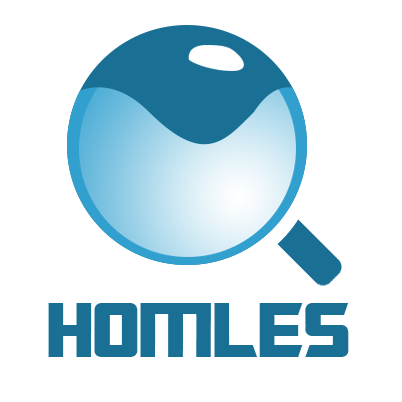
<style>
.page{position:relative;width:402px;height:402px;background:#ffffff}
.page>*{position:absolute;margin:0}
.t1{font:86.1px "TransformersMovie";color:#1a7094}
</style>
<div class="page">
<p class="t1" style="left:48px;top:303px;width:301px;height:54px">HOMLES</p>
</div>
